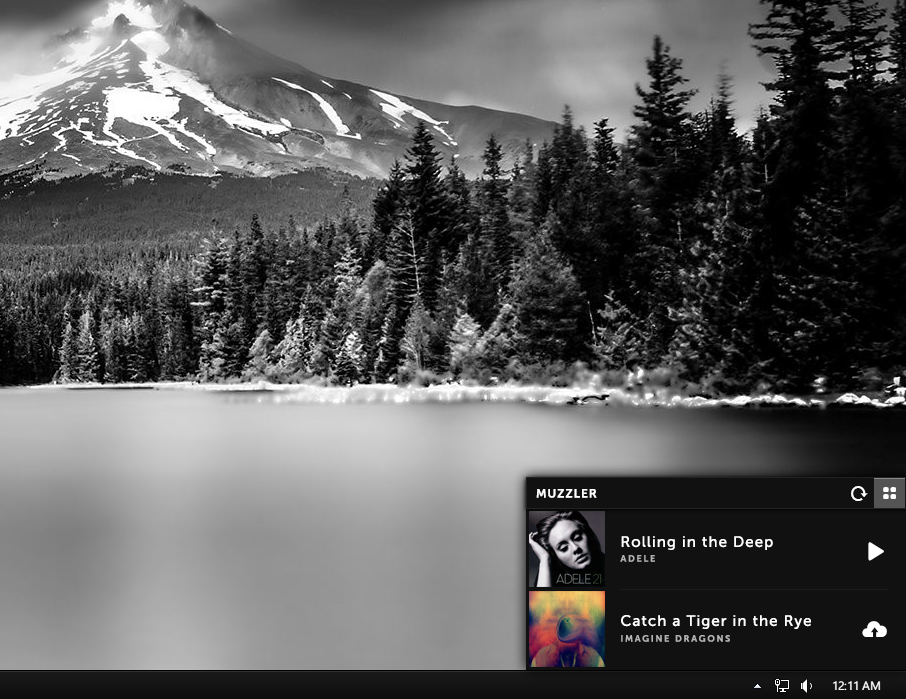
<style>
.page{position:relative;width:906px;height:699px}
.page>*{position:absolute;margin:0}
.t1{font:12px "MuseoSans-700";letter-spacing:0.075em;color:#ffffff;text-transform:uppercase}
.t2{font:15px "MuseoSans-500";letter-spacing:0.075em;color:#ffffff}
.t3{font:9px "MuseoSans-700";letter-spacing:0.2em;color:#b4b4b4;text-transform:uppercase}
</style>
<div class="page">
<p class="t1" style="left:536px;top:489px;width:61px;height:9px">MUZZLER</p>
<p class="t2" style="left:621px;top:536px;width:152px;height:14px">Rolling in the Deep</p>
<p class="t3" style="left:620px;top:555px;width:35px;height:7px">Adele</p>
<p class="t2" style="left:621px;top:615px;width:190px;height:14px">Catch a Tiger in the Rye</p>
<p class="t3" style="left:621px;top:635px;width:109px;height:7px">Imagine dragons</p>
</div>
